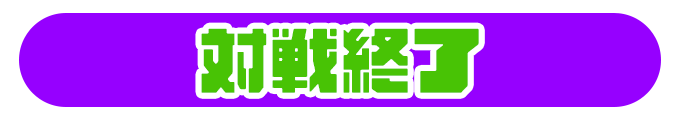
<style>
.page{position:relative;width:680px;height:120px;background:#9600ff}
.page>*{position:absolute;margin:0}
.t1{font:71px "AB-countryroad";color:#48c305}
</style>
<div class="page">
<p class="t1" style="left:201px;top:28px;width:278px;height:65px">対戦終了</p>
</div>
